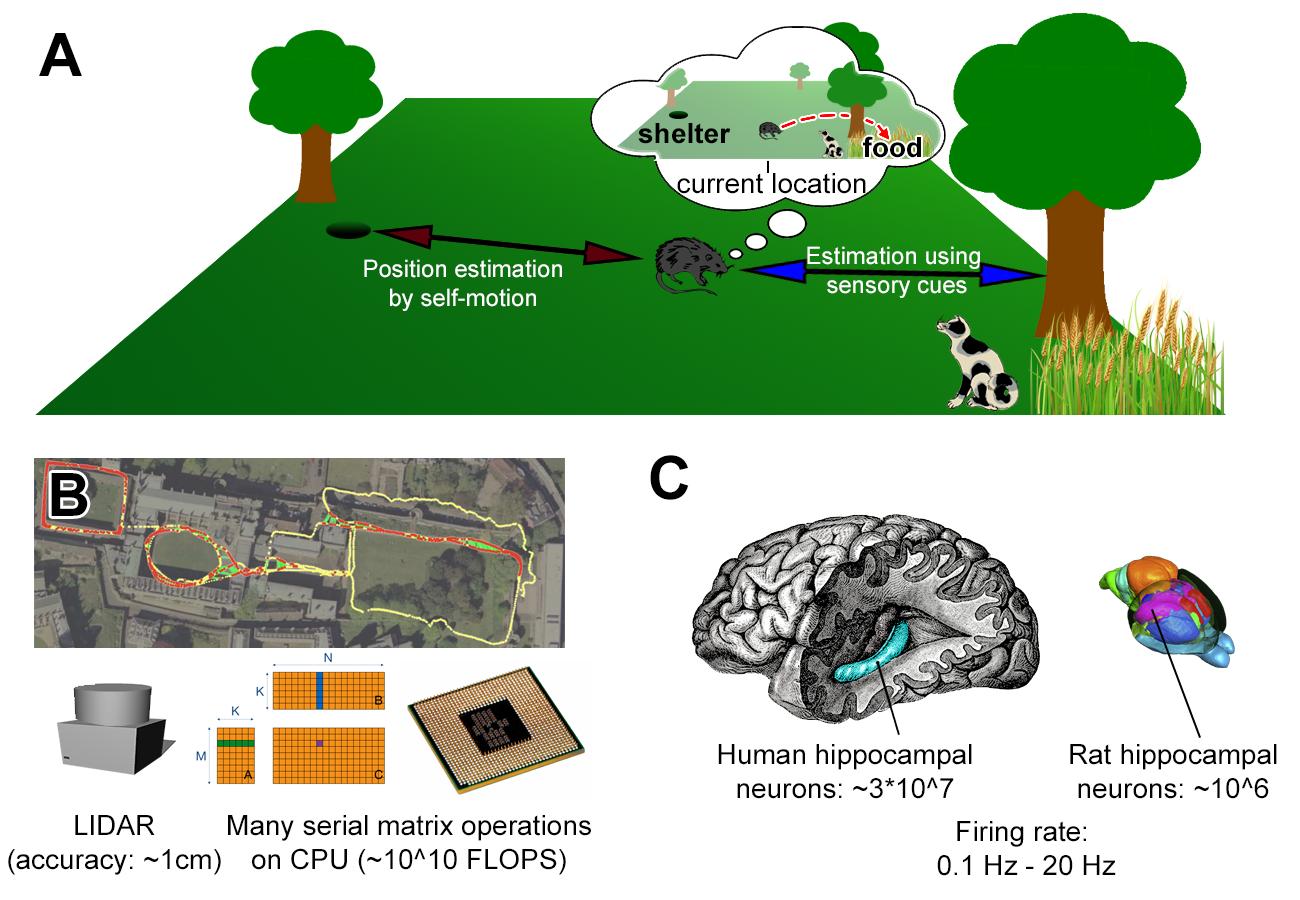
<style>
.page{position:relative;width:1300px;height:900px;background:#ffffff}
.page>*{position:absolute;margin:0}
.t1{font:60px "Arial-BoldMT";color:#000000}
.t2{font:28px "Arial-BoldMT";color:#000000}
.t3{font:28px "ArialMT";color:#000000}
.t4{font:24px "ArialMT";color:#ffffff}
</style>
<div class="page">
<p class="t1" style="left:39px;top:33px;width:43px;height:43px">A</p>
<p class="t2" style="left:638px;top:123px;width:93px;height:21px">shelter</p>
<p class="t2" style="left:863px;top:136px;width:58px;height:22px">food</p>
<p class="t3" style="left:677px;top:173px;width:189px;height:21px">current location</p>
<p class="t4" style="left:807px;top:246px;width:173px;height:52px;text-align:center">Estimation using <br>sensory cues</p>
<p class="t4" style="left:364px;top:259px;width:198px;height:52px;text-align:center">Position estimation<br>by self-motion</p>
<p class="t1" style="left:650px;top:455px;width:39px;height:45px">C</p>
<p class="t1" style="left:51px;top:473px;width:37px;height:43px">B</p>
<p class="t3" style="left:718px;top:744px;width:254px;height:55px;text-align:center">Human hippocampal<br>neurons: ~3*10^7</p>
<p class="t3" style="left:1070px;top:744px;width:207px;height:55px;text-align:center">Rat hippocampal<br>neurons: ~10^6</p>
<p class="t3" style="left:8px;top:815px;width:213px;height:60px;text-align:center">LIDAR<br>(accuracy: ~1cm)</p>
<p class="t3" style="left:228px;top:815px;width:363px;height:60px;text-align:center">Many serial matrix operations<br>on CPU (~10^10 FLOPS)</p>
<p class="t3" style="left:937px;top:821px;width:179px;height:55px;text-align:center">Firing rate: <br>0.1 Hz - 20 Hz</p>
</div>
